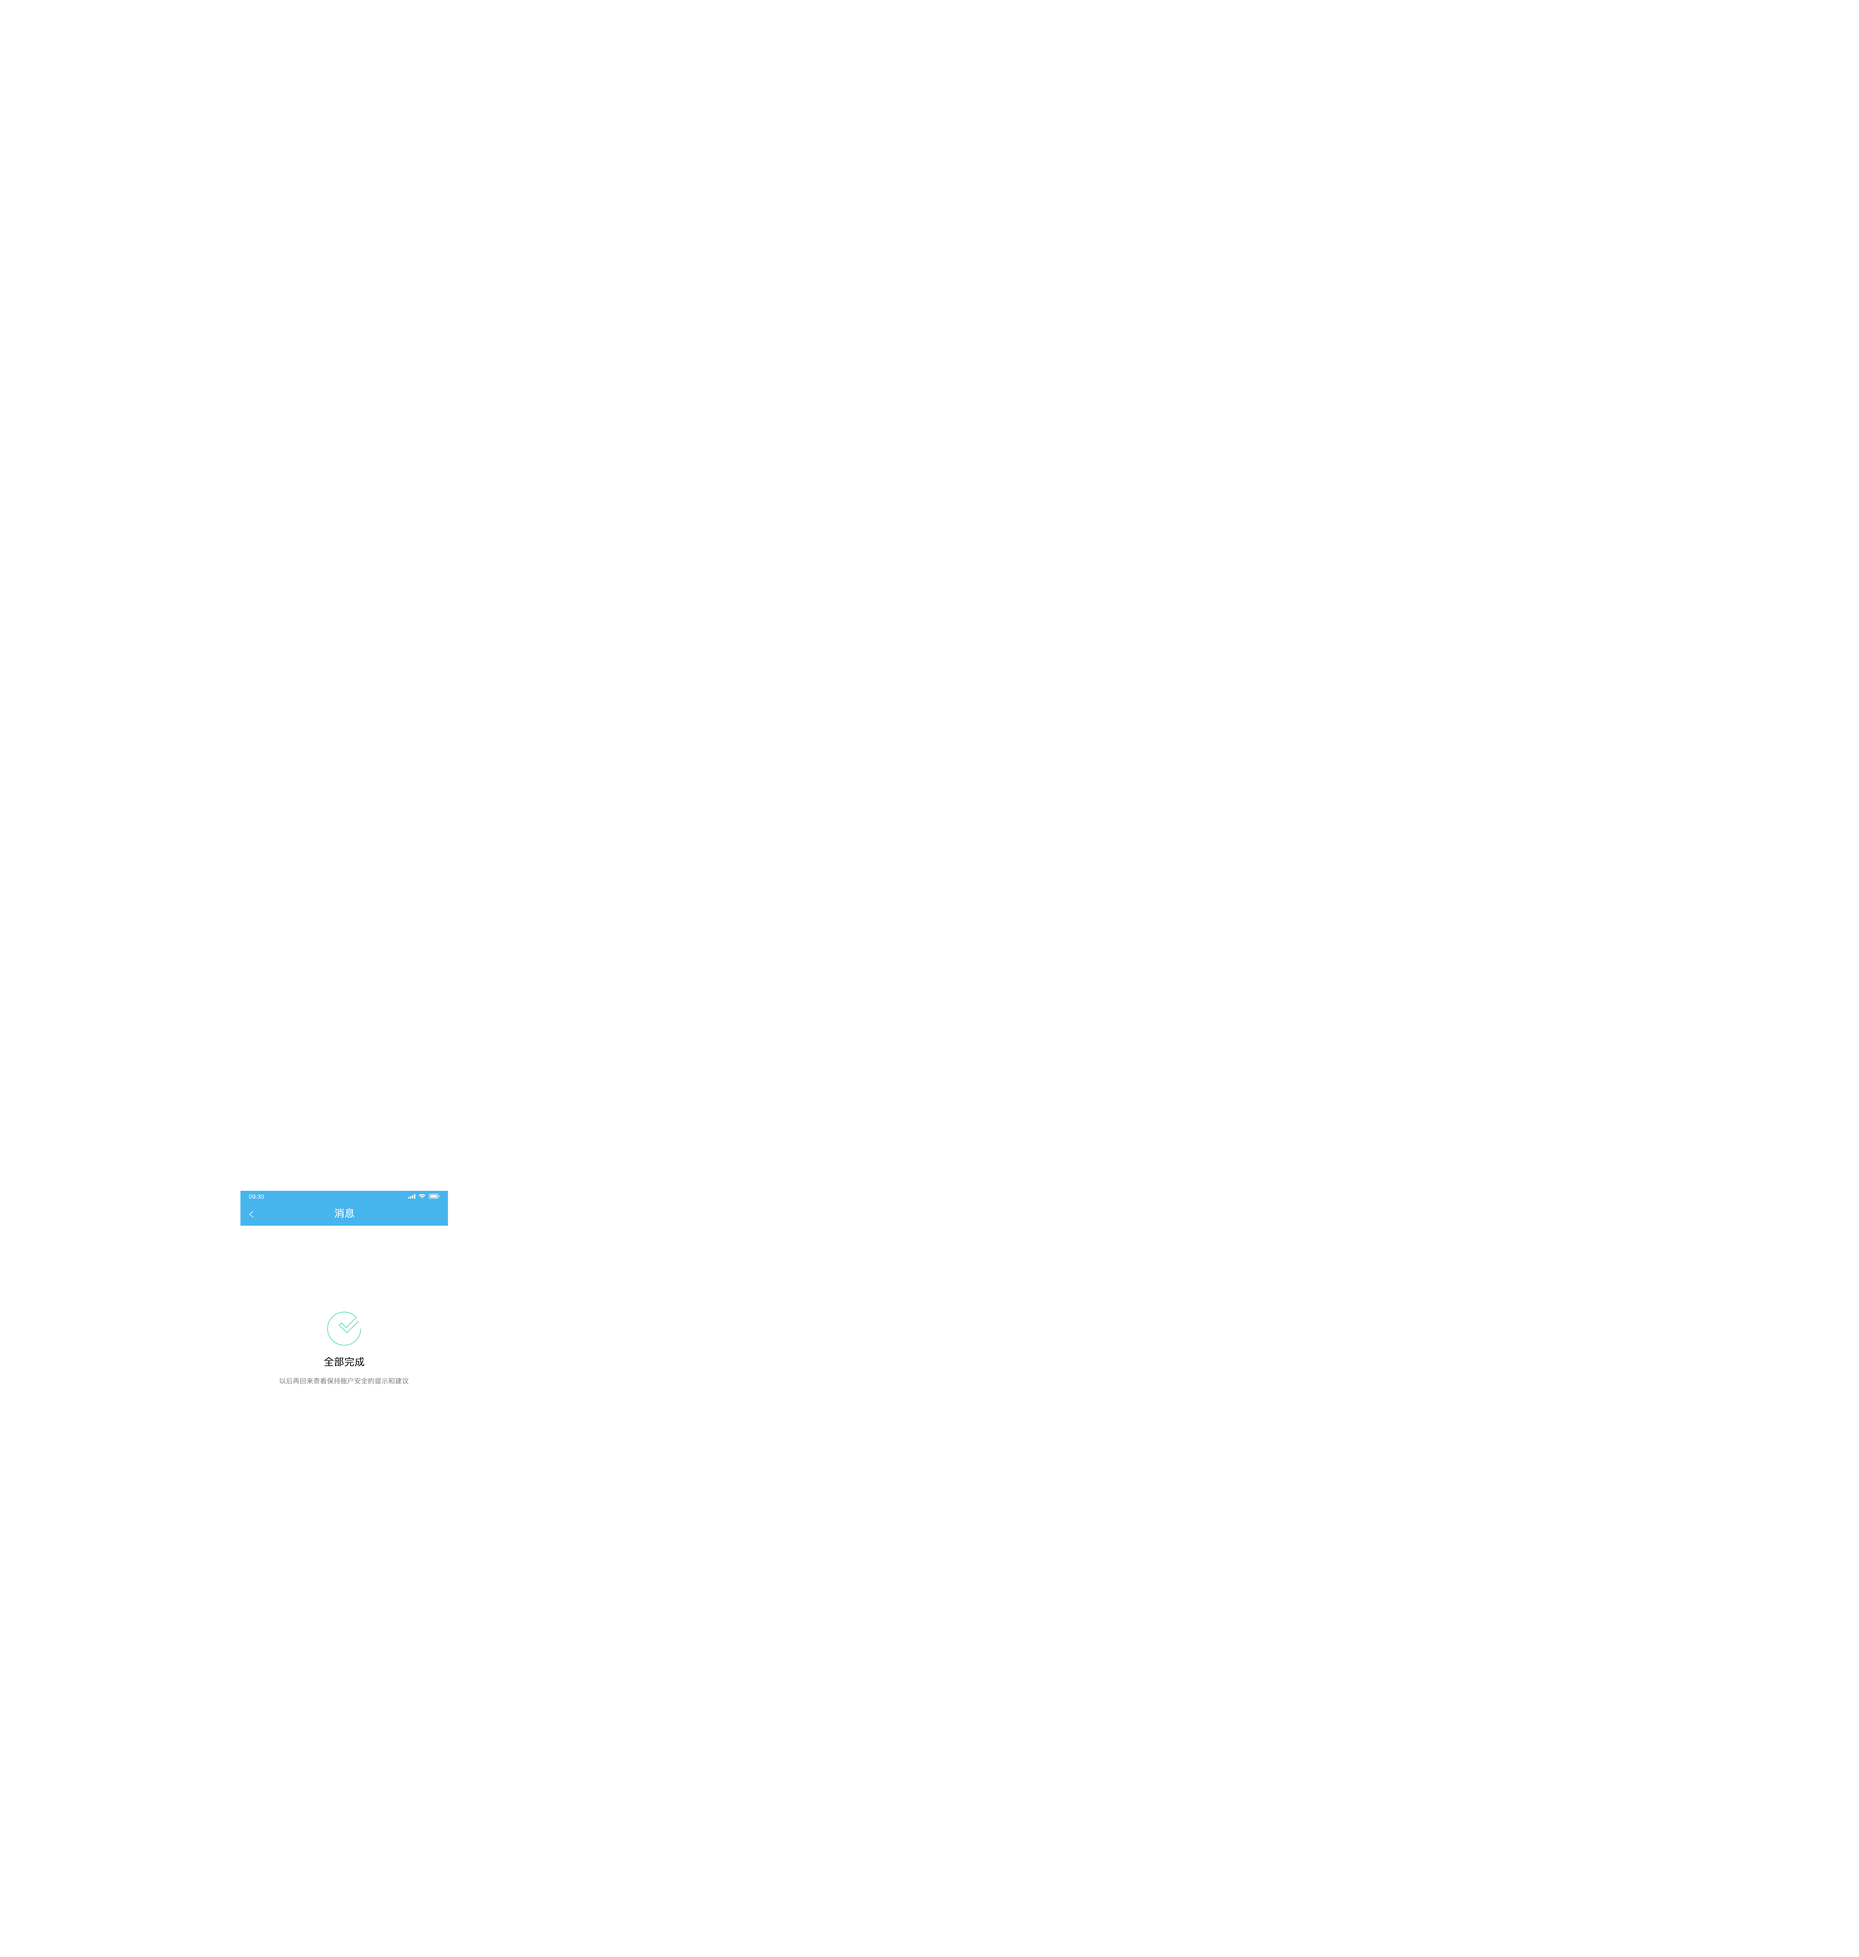
<style>
.page{position:relative;width:1859px;height:1957px;background:#ffffff}
.page>*{position:absolute;margin:0}
.t1{font:5.5px "PingFang-SC-Regular";color:#ffffff;font-weight:bold}
.t2{font:10px "PingFang-SC-Regular";color:#ffffff;font-weight:bold}
.t3{font:10px "PingFang-SC-Regular";color:#000000;font-weight:bold}
.t4{font:6.6px "PingFang-SC-Regular";color:#7f7f7f;font-weight:bold}
</style>
<div class="page">
<p class="t1" style="left:249px;top:1194px;width:15px;height:5px">09:30</p>
<p class="t2" style="left:335px;top:1208px;width:20px;height:9px">消息</p>
<p class="t3" style="left:324px;top:1357px;width:40px;height:9px">全部完成</p>
<p class="t4" style="left:280px;top:1377px;width:129px;height:7px">以后再回来查看保持账户安全的提示和建议</p>
</div>
